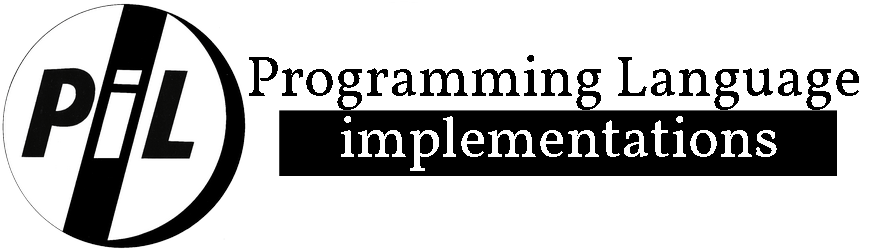
<style>
.page{position:relative;width:880px;height:250px;background:#ffffff}
.page>*{position:absolute;margin:0}
.t1{font:58.3px "Vollkorn-Regular";color:#000000}
.t2{font:58.3px "Vollkorn-Regular";color:#ffffff}
</style>
<div class="page">
<p class="t1" style="left:249px;top:55px;width:610px;height:55px">Programming Language</p>
<p class="t2" style="left:341px;top:116px;width:436px;height:55px">implementations</p>
</div>
